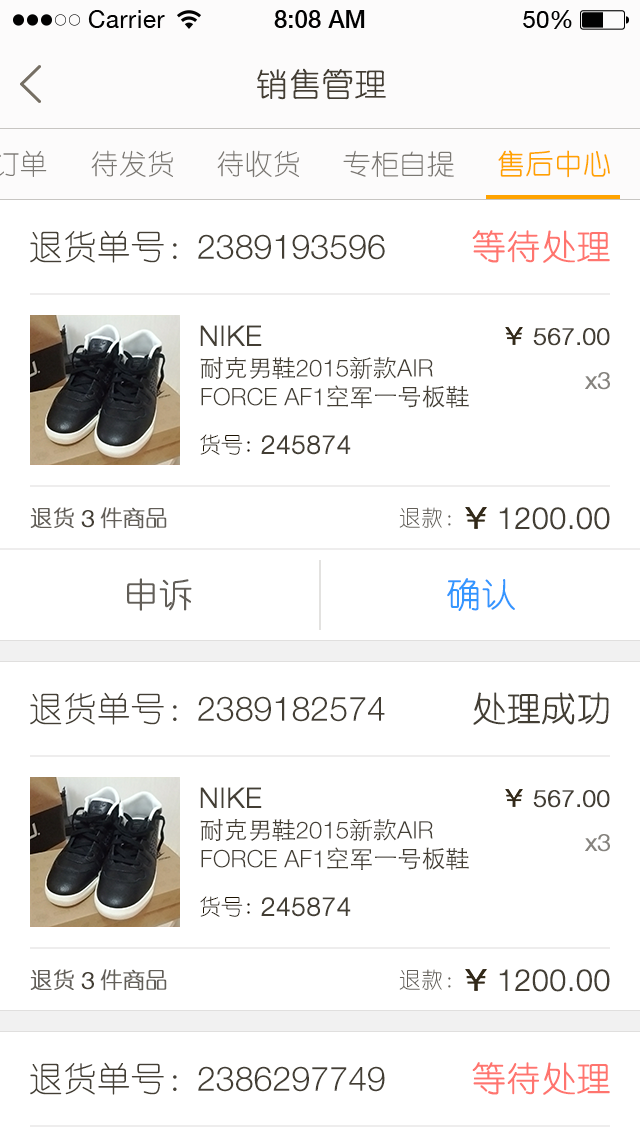
<style>
.page{position:relative;width:640px;height:1136px;background:#ffffff}
.page>*{position:absolute;margin:0}
.t1{font:32px "YouYuan";color:#433d33;text-transform:uppercase;font-weight:bold}
.t2{font:28px "YouYuan";color:#7a7772;text-transform:uppercase}
.t3{font:28px "YouYuan";color:#ffa300;text-transform:uppercase;font-weight:bold}
.t4{font:34px "YouYuan";color:#433e34;text-transform:uppercase}
.t5{font:34px "YouYuan";color:#ff5f57;text-transform:uppercase;font-weight:bold}
.t6{font:34px "HelveticaNeueLTPro-Lt";color:#433e34;text-transform:uppercase}
.t7{font:28px "HelveticaNeueLTPro-Lt";color:#433e34;text-transform:uppercase;font-weight:bold}
.t8{font:24px "HelveticaNeueLTPro-Lt";color:#433e34;text-transform:uppercase;font-weight:bold}
.t9{font:24px "HelveticaNeueLTPro-Lt";color:#433e34;text-transform:uppercase}
.t10{font:24px "STHeitiSC-Light";color:#433e34;text-transform:uppercase}
.t11{font:24px "HelveticaNeueLTPro-Lt";color:#86837e;font-weight:bold}
.t12{font:22px "YouYuan";color:#1b1100;text-transform:uppercase}
.t13{font:26px "HelveticaNeueLTPro-Lt";color:#433e34;text-transform:uppercase;font-weight:bold}
.t14{font:22px "YouYuan";color:#625e58;text-transform:uppercase;font-weight:bold}
.t15{font:22px "YouYuan";color:#625e58;text-transform:uppercase}
.t16{font:30px "HelveticaNeueLTPro-Lt";color:#433e34;text-transform:uppercase;font-weight:bold}
.t17{font:34px "YouYuan";color:#625e58;text-transform:uppercase;font-weight:bold}
.t18{font:34px "YouYuan";color:#3496ff;text-transform:uppercase;font-weight:bold}
.t19{font:34px "YouYuan";color:#433e34;text-transform:uppercase;font-weight:bold}
</style>
<div class="page">
<p class="t1" style="left:257px;top:68px;width:129px;height:32px">销售管理</p>
<p class="t2" style="left:91px;top:150px;width:82px;height:27px">待发货</p>
<p class="t2" style="left:217px;top:150px;width:82px;height:28px">待收货</p>
<p class="t2" style="left:343px;top:150px;width:111px;height:27px">专柜自提</p>
<p class="t3" style="left:498px;top:150px;width:112px;height:28px">售后中心</p>
<p class="t4" style="left:30px;top:230px;width:147px;height:33px">退货单号：</p>
<p class="t5" style="left:472px;top:230px;width:138px;height:33px;opacity:0.9">等待处理</p>
<p class="t6" style="left:198px;top:234px;width:187px;height:26px">2389193596</p>
<p class="t7" style="left:200px;top:325px;width:62px;height:21px">NIKE</p>
<p class="t8" style="left:533px;top:328px;width:77px;height:18px">567.00</p>
<p class="t9" style="left:200px;top:356px;width:269px;height:52px"><span class="t10">耐克男鞋</span>2015<span class="t10">新款</span>air force AF1<span class="t10">空军一号板鞋</span></p>
<p class="t11" style="left:585px;top:372px;width:25px;height:18px">x3</p>
<p class="t12" style="left:200px;top:434px;width:50px;height:21px">货号:</p>
<p class="t13" style="left:261px;top:435px;width:90px;height:20px">245874</p>
<p class="t14" style="left:30px;top:507px;width:44px;height:21px">退货</p>
<p class="t8" style="left:81px;top:510px;width:13px;height:18px">3</p>
<p class="t14" style="left:100px;top:507px;width:67px;height:22px">件商品</p>
<p class="t15" style="left:399px;top:507px;width:52px;height:21px">退款：</p>
<p class="t16" style="left:499px;top:507px;width:111px;height:23px">1200.00</p>
<p class="t17" style="left:127px;top:578px;width:65px;height:33px">申诉</p>
<p class="t18" style="left:447px;top:578px;width:68px;height:33px">确认</p>
<p class="t4" style="left:30px;top:692px;width:147px;height:33px">退货单号：</p>
<p class="t6" style="left:198px;top:696px;width:187px;height:26px">2389182574</p>
<p class="t19" style="left:473px;top:692px;width:136px;height:33px">处理成功</p>
<p class="t7" style="left:200px;top:787px;width:62px;height:21px">NIKE</p>
<p class="t8" style="left:533px;top:790px;width:77px;height:18px">567.00</p>
<p class="t9" style="left:200px;top:818px;width:269px;height:52px"><span class="t10">耐克男鞋</span>2015<span class="t10">新款</span>air force AF1<span class="t10">空军一号板鞋</span></p>
<p class="t11" style="left:585px;top:834px;width:25px;height:18px">x3</p>
<p class="t12" style="left:200px;top:896px;width:50px;height:21px">货号:</p>
<p class="t13" style="left:261px;top:897px;width:90px;height:20px">245874</p>
<p class="t14" style="left:30px;top:969px;width:44px;height:21px">退货</p>
<p class="t8" style="left:81px;top:972px;width:13px;height:18px">3</p>
<p class="t14" style="left:100px;top:969px;width:67px;height:22px">件商品</p>
<p class="t15" style="left:399px;top:969px;width:52px;height:21px">退款：</p>
<p class="t16" style="left:499px;top:969px;width:111px;height:23px">1200.00</p>
<p class="t4" style="left:30px;top:1062px;width:147px;height:33px">退货单号：</p>
<p class="t5" style="left:472px;top:1062px;width:138px;height:33px;opacity:0.9">等待处理</p>
<p class="t6" style="left:198px;top:1066px;width:187px;height:26px">2386297749</p>
</div>
